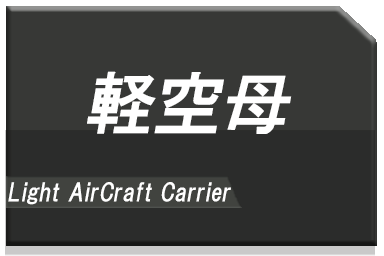
<style>
.page{position:relative;width:384px;height:256px;background:#373836}
.page>*{position:absolute;margin:0}
.t1{font:68px "HGPGothicE";color:#ffffff;font-style:italic}
.t2{font:24px "HGPGothicE";color:#ffffff;font-style:italic}
</style>
<div class="page">
<p class="t1" style="left:87px;top:71px;width:205px;height:63px">軽空母</p>
<p class="t2" style="left:8px;top:182px;width:223px;height:23px">Light AirCraft Carrier</p>
</div>
